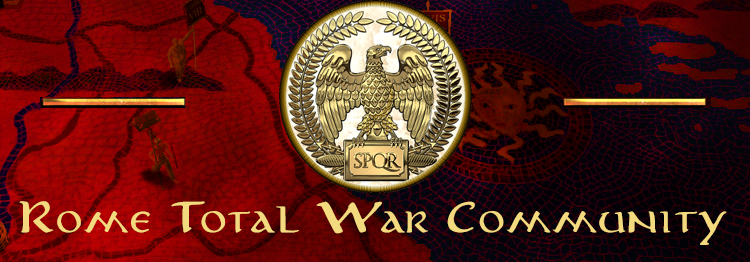
<style>
.page{position:relative;width:750px;height:262px}
.page>*{position:absolute;margin:0}
.t1{font:33px "Aniron";color:#f4da7e}
</style>
<div class="page">
<p class="t1" style="left:19px;top:201px;width:708px;height:44px">Rome Total War Community</p>
</div>
